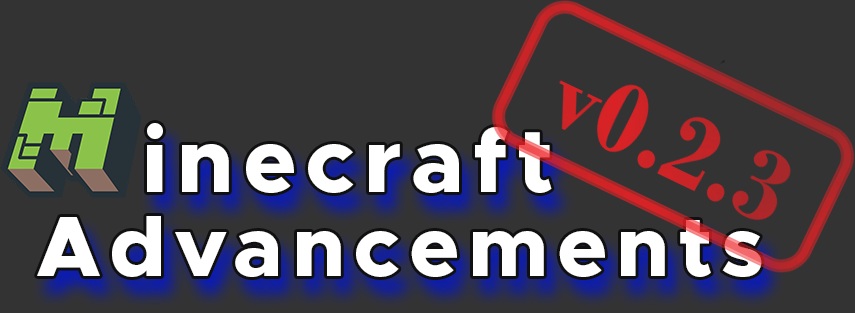
<style>
.page{position:relative;width:855px;height:313px;background:#333333}
.page>*{position:absolute;margin:0}
.t1{font:90.6px "Metropolis-ExtraBold";letter-spacing:0.1em;color:#ffffff}
.t2{font:85.4px "Metropolis-ExtraBold";letter-spacing:0.1em;color:#ffffff}
</style>
<div class="page">
<p class="t1" style="left:147px;top:123px;width:405px;height:70px">inecraft</p>
<p class="t2" style="left:37px;top:216px;width:725px;height:61px">Advancements</p>
</div>
